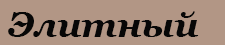
<style>
.page{position:relative;width:225px;height:45px;background:#b29685}
.page>*{position:absolute;margin:0}
.t1{font:35.5px "Georgia-BoldItalic";color:#070707}
</style>
<div class="page">
<p class="t1" style="left:8px;top:11px;width:191px;height:26px">Элитный</p>
</div>
